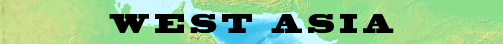
<style>
.page{position:relative;width:503px;height:44px}
.page>*{position:absolute;margin:0}
.t1{font:25.6px "BlackoakStd";letter-spacing:0.3em;color:#000000;scale:0.66 1}
</style>
<div class="page">
<p class="t1" style="left:109px;top:14px;width:285px;height:19px">WEST ASIA</p>
</div>
